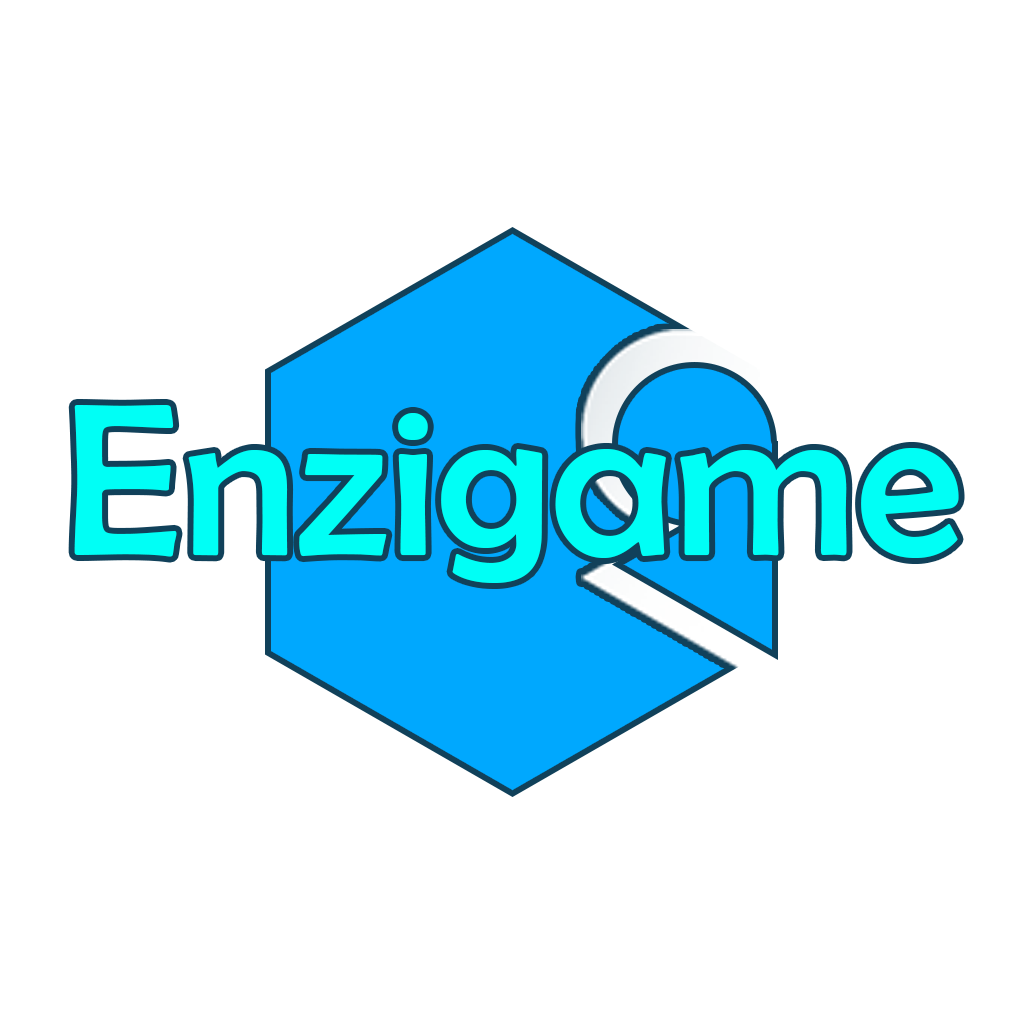
<style>
.page{position:relative;width:1024px;height:1024px;background:#ffffff}
.page>*{position:absolute;margin:0}
.t1{font:219.3px "BerlinSansFB-Reg";color:#00fff6}
</style>
<div class="page">
<p class="t1" style="left:74px;top:405px;width:885px;height:178px">Enzigame</p>
</div>
